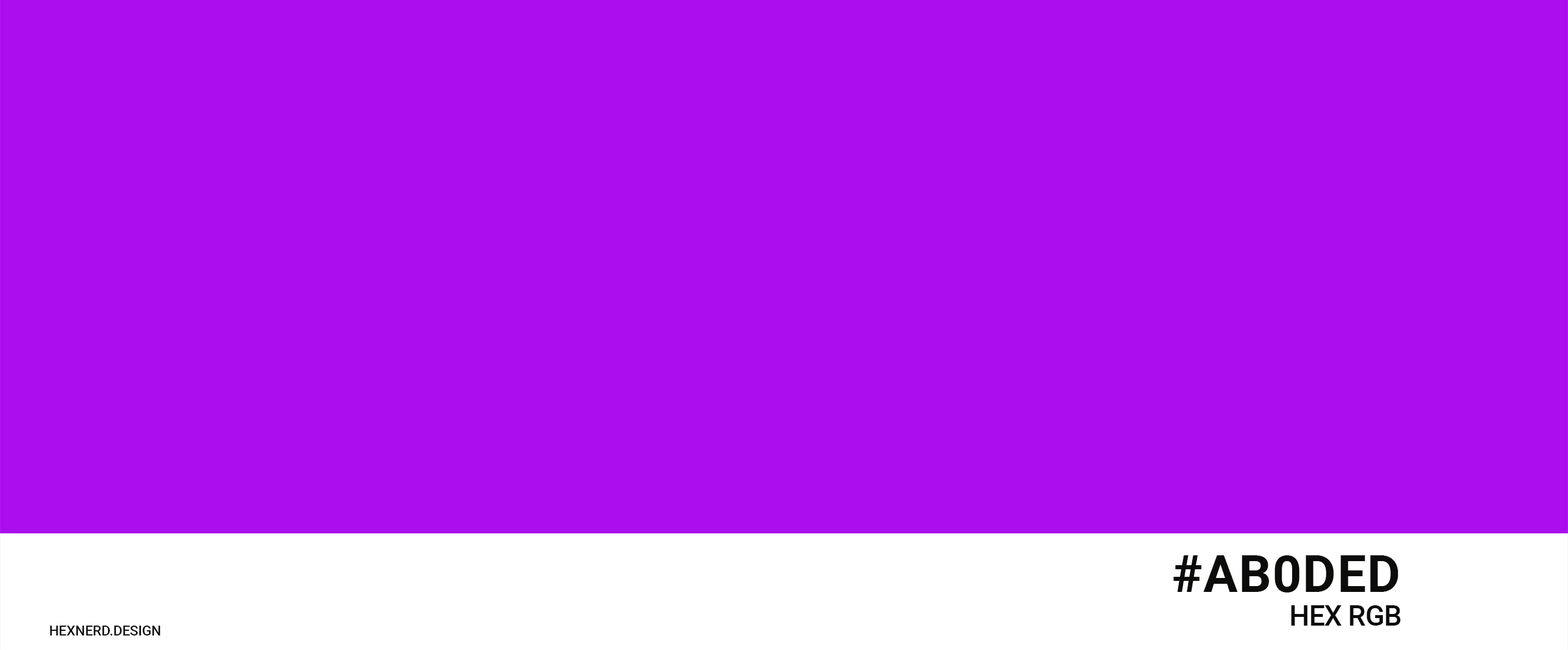
<style>
.page{position:relative;width:1568px;height:650px;background:#ab0ded}
.page>*{position:absolute;margin:0}
.t1{font:51.2px "Roboto-Bold";letter-spacing:0.02em;color:#0c0c0b}
.t2{font:28.4px "Roboto-Medium";letter-spacing:-0.02em;color:#0c0c0b}
.t3{font:14.2px "Roboto-Medium";letter-spacing:-0.02em;color:#0c0c0b}
</style>
<div class="page">
<p class="t1" style="left:1173px;top:555px;width:225px;height:37px">#AB0DED</p>
<p class="t2" style="left:1291px;top:605px;width:110px;height:20px">HEX RGB</p>
<p class="t3" style="left:50px;top:625px;width:110px;height:10px">HEXNERD.DESIGN</p>
</div>
